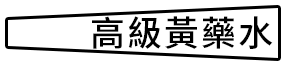
<style>
.page{position:relative;width:286px;height:66px;background:#ffffff}
.page>*{position:absolute;margin:0}
.t1{font:35px "NotoSansCJKtc-Medium";letter-spacing:0.06em;color:#000000}
</style>
<div class="page">
<p class="t1" style="left:92px;top:16px;width:181px;height:33px">高級黃藥水</p>
</div>
